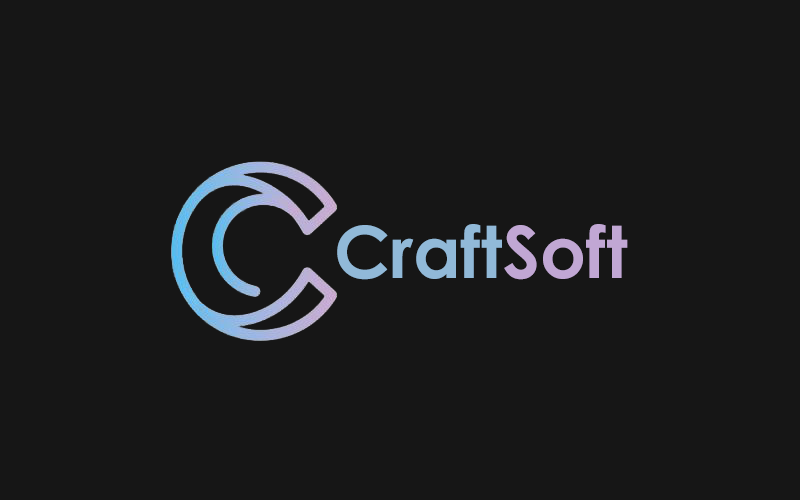
<style>
.page{position:relative;width:800px;height:500px;background:#161616}
.page>*{position:absolute;margin:0}
.t1{font:72px "CenturyGothic-Bold";color:#91b9d8}
.t2{font:72px "CenturyGothic-Bold";color:#c1a7d4}
</style>
<div class="page">
<p class="t1" style="left:337px;top:224px;width:291px;height:56px">Craft<span class="t2">Soft</span></p>
</div>
